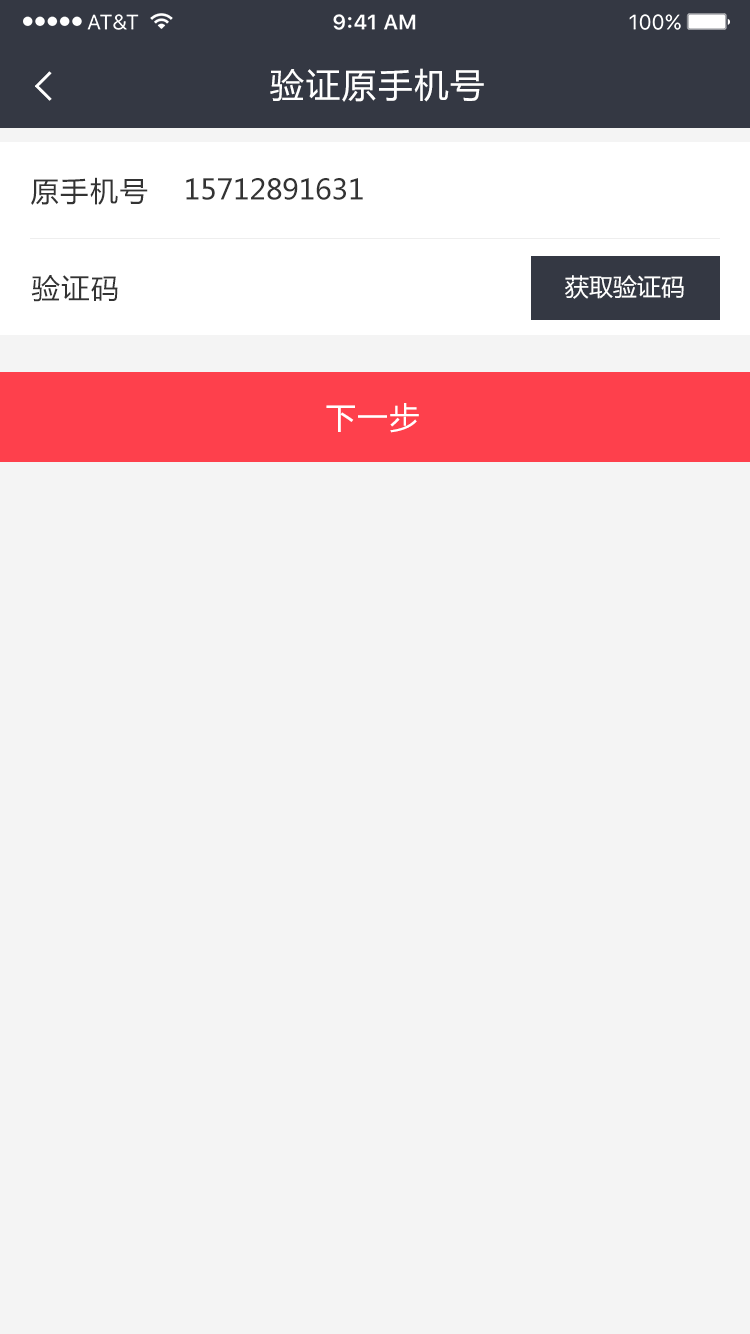
<style>
.page{position:relative;width:750px;height:1334px;background:#f4f4f4}
.page>*{position:absolute;margin:0}
.t1{font:34px "MicrosoftYaHei";letter-spacing:0.06em;color:#ffffff}
.t2{font:28px "MicrosoftYaHei";letter-spacing:0.06em;color:#333333}
.t3{font:28px "MicrosoftYaHei";color:#333333}
.t4{font:24px "MicrosoftYaHei";color:#ffffff}
.t5{font:30px "MicrosoftYaHei";letter-spacing:0.06em;color:#ffffff}
</style>
<div class="page">
<p class="t1" style="left:270px;top:68px;width:214px;height:34px">验证原手机号</p>
<p class="t2" style="left:31px;top:177px;width:117px;height:28px">原手机号</p>
<p class="t3" style="left:186px;top:178px;width:177px;height:22px">15712891631</p>
<p class="t2" style="left:31px;top:275px;width:87px;height:27px">验证码</p>
<p class="t4" style="left:565px;top:275px;width:119px;height:24px">获取验证码</p>
<p class="t5" style="left:326px;top:403px;width:93px;height:30px">下一步</p>
</div>
